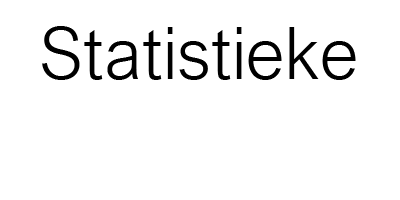
<style>
.page{position:relative;width:400px;height:200px;background:#ffffff}
.page>*{position:absolute;margin:0}
.t1{font:72px "ArialNova-Light";color:#000000}
</style>
<div class="page">
<p class="t1" style="left:42px;top:26px;width:314px;height:54px">Statistieke</p>
</div>
